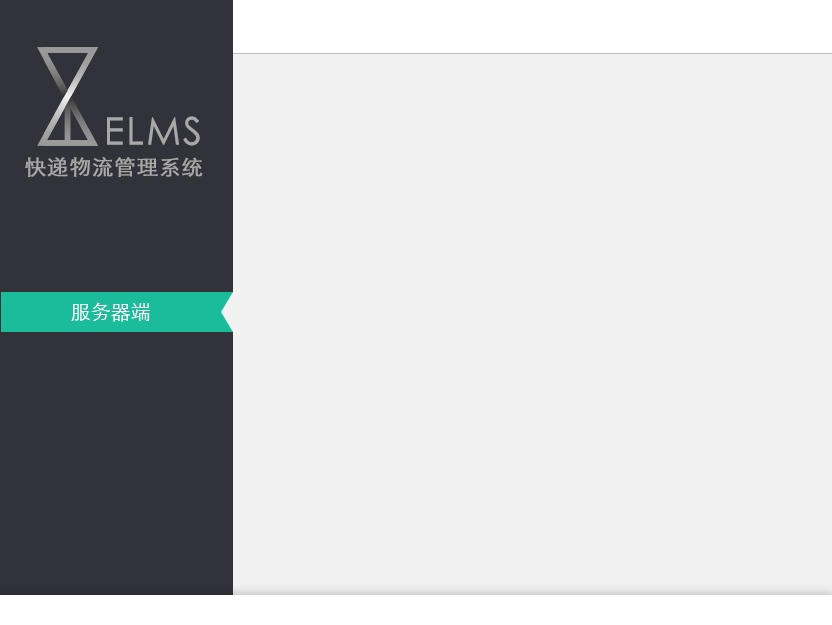
<style>
.page{position:relative;width:832px;height:625px;background:#f1f1f1}
.page>*{position:absolute;margin:0}
.t1{font:21.1px/42.1px "STXihei";letter-spacing:0.035em;color:#a8a8a8;font-weight:bold}
.t2{font:37.6px/42.1px "STXihei";letter-spacing:0.035em;color:#a8a8a8;font-weight:bold}
.t3{font:20px "STXihei";color:#ffffff}
</style>
<div class="page">
<p class="t1" style="left:25px;top:116px;width:178px;height:61px;text-align:right"><span class="t2">ELMS<br></span>快递物流管理系统</p>
<p class="t3" style="left:71px;top:302px;width:79px;height:20px">服务器端</p>
</div>
